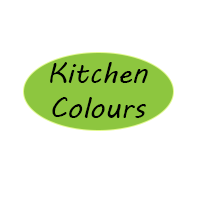
<style>
.page{position:relative;width:200px;height:200px;background:#ffffff}
.page>*{position:absolute;margin:0}
.t1{font:29px "MVBoli";color:#000000}
</style>
<div class="page">
<p class="t1" style="left:50px;top:62px;width:98px;height:56px;text-align:center">Kitchen Colours</p>
</div>
